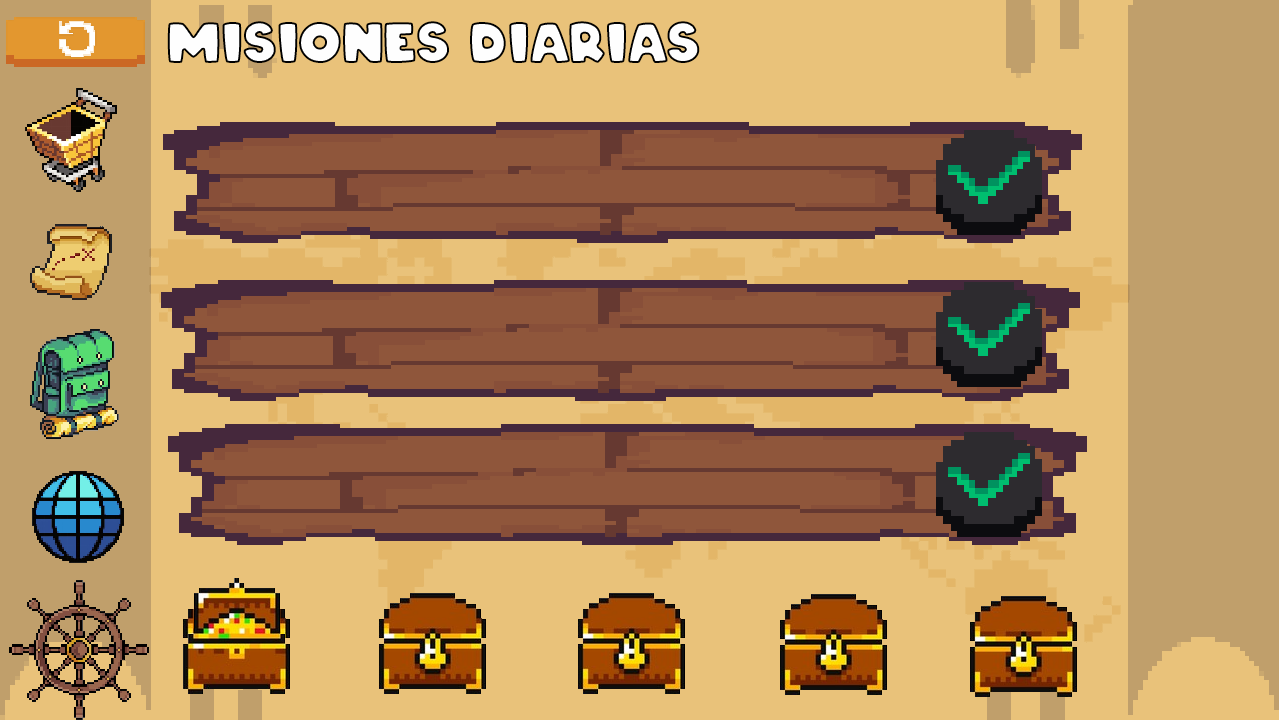
<style>
.page{position:relative;width:1280px;height:720px;background:#e9c27a}
.page>*{position:absolute;margin:0}
.t1{font:54.2px "ARCO-Typography-Regular";color:#fefefe}
</style>
<div class="page">
<p class="t1" style="left:167px;top:21px;width:533px;height:42px">Misiones diarias</p>
</div>
